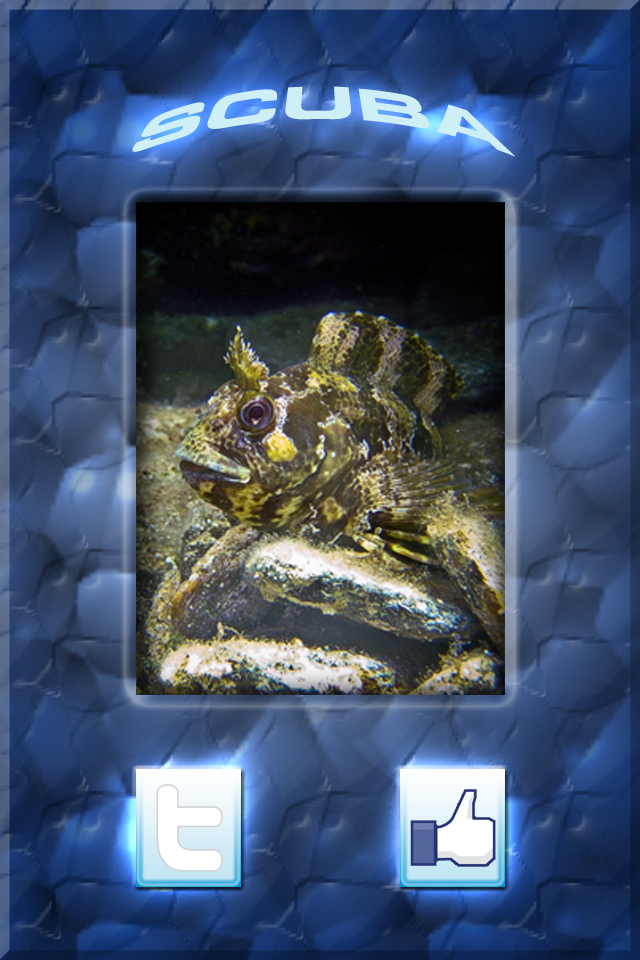
<style>
.page{position:relative;width:640px;height:960px}
.page>*{position:absolute;margin:0}
.t1{font:65px "DuckFontWerbungBol";color:#cfeff7}
.t2{font:34px "DuckFontWerbungBol";color:#cfeff7}
</style>
<div class="page">
<p class="t1" style="left:132px;top:86px;width:383px;height:71px"><span class="t2"><br></span>SCUBA</p>
</div>
